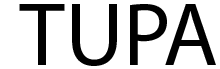
<style>
.page{position:relative;width:220px;height:69px;background:#ffffff}
.page>*{position:absolute;margin:0}
.t1{font:90px "MyriadPro-Regular";color:#000000}
.t2{font:90px "MyriadPro-Regular";color:#ffffff}
</style>
<div class="page">
<p class="t1" style="left:4px;top:4px;width:212px;height:62px"><span class="t2">i</span>TUPA</p>
</div>
